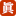
<style>
.page{position:relative;width:16px;height:16px;background:#c73100}
.page>*{position:absolute;margin:0}
.t1{font:12px "KozMinPro-Bold";color:#ffffff}
</style>
<div class="page">
<p class="t1" style="left:2px;top:2px;width:12px;height:12px">眞</p>
</div>
